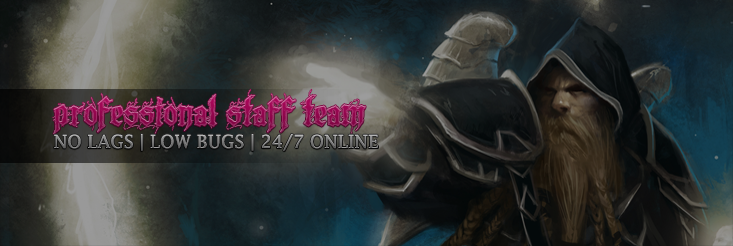
<style>
.page{position:relative;width:733px;height:246px}
.page>*{position:absolute;margin:0}
.t1{font:40.2px "LazyMonk-Demo";color:#9a185a;scale:1.12 1}
.t2{font:18px "LucidaFax"}
</style>
<div class="page">
<p class="t1" style="left:52px;top:89px;width:314px;height:46px">Professional staff team</p>
<p class="t2" style="left:54px;top:134px;width:324px;height:17px">NO LAGS | LOW BUGS | 24/7 ONLINE</p>
</div>
